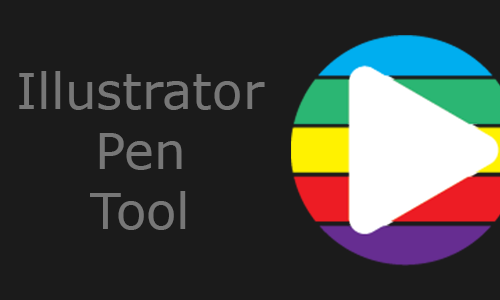
<style>
.page{position:relative;width:500px;height:300px;background:#1b1b1b}
.page>*{position:absolute;margin:0}
.t1{font:50px "Verdana";color:#777777}
</style>
<div class="page">
<p class="t1" style="left:19px;top:71px;width:246px;height:159px;text-align:center">Illustrator<br>Pen<br>Tool</p>
</div>
